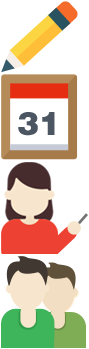
<style>
.page{position:relative;width:89px;height:349px;background:#ffffff}
.page>*{position:absolute;margin:0}
.t1{font:32.4px "FZCCHJW--GB1-0";letter-spacing:0.01em;color:#4b5662}
</style>
<div class="page">
<p class="t1" style="left:18px;top:112px;width:37px;height:24px">31</p>
</div>
